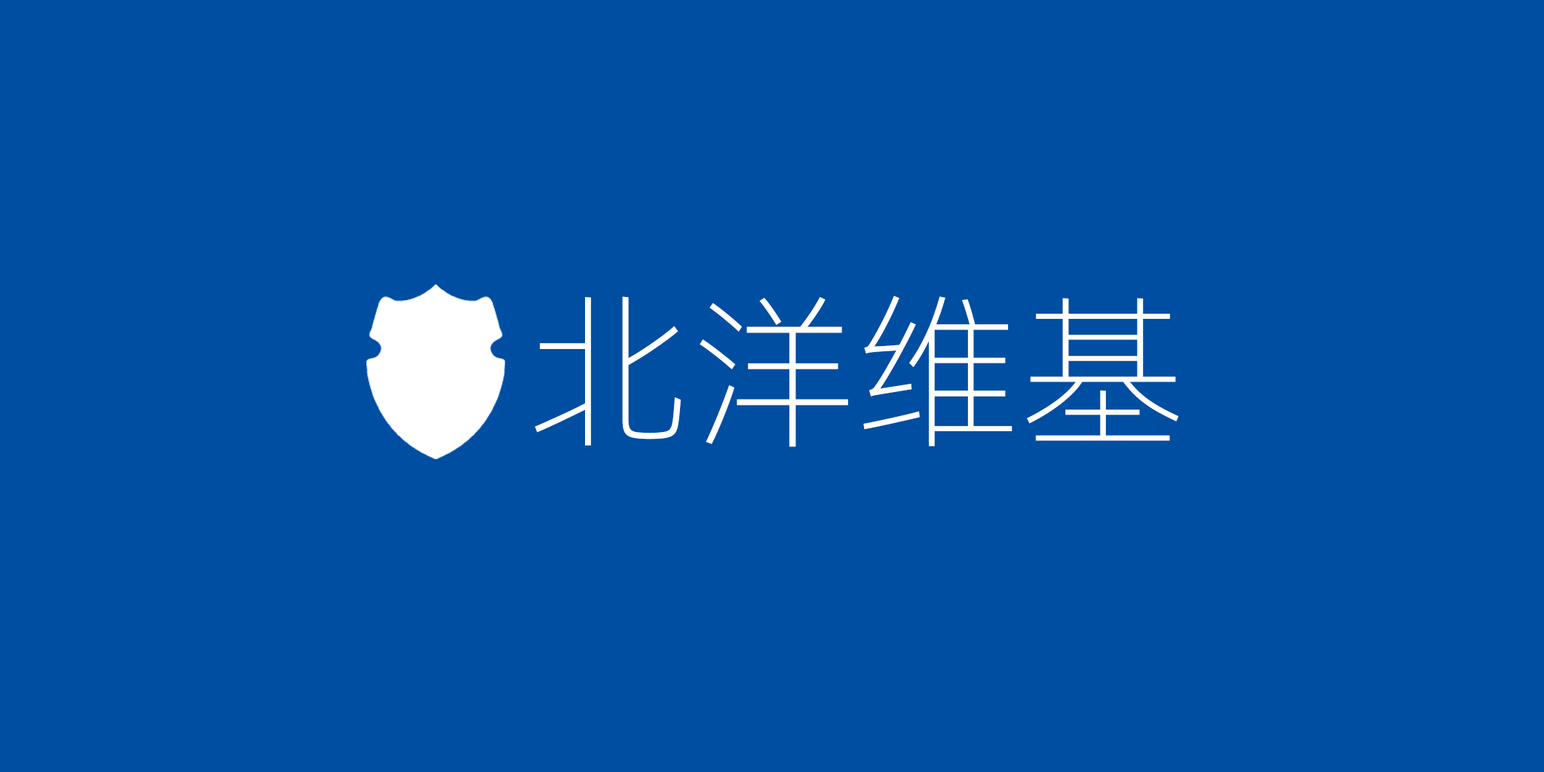
<style>
.page{position:relative;width:1544px;height:772px;background:#004ea2}
.page>*{position:absolute;margin:0}
.t1{font:167.3px "Alibaba-PuHuiTi-L";color:#ffffff}
</style>
<div class="page">
<p class="t1" style="left:535px;top:296px;width:644px;height:151px">北洋维基</p>
</div>
